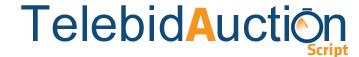
<style>
.page{position:relative;width:359px;height:57px;background:#ffffff}
.page>*{position:absolute;margin:0}
.t1{font:50px "ArialMT";letter-spacing:0.005em;color:#104a7d}
.t2{font:50px "KlavikaBold-Bold";letter-spacing:0.005em;color:#f7941d}
.t3{font:16.7px "KlavikaBold-Bold";letter-spacing:0.005em;color:#f7941d}
</style>
<div class="page">
<p class="t1" style="left:21px;top:5px;width:325px;height:37px">Telebid  ucti  n</p>
<p class="t2" style="left:185px;top:7px;width:31px;height:34px">A</p>
<p class="t3" style="left:307px;top:43px;width:41px;height:16px">Script</p>
</div>
